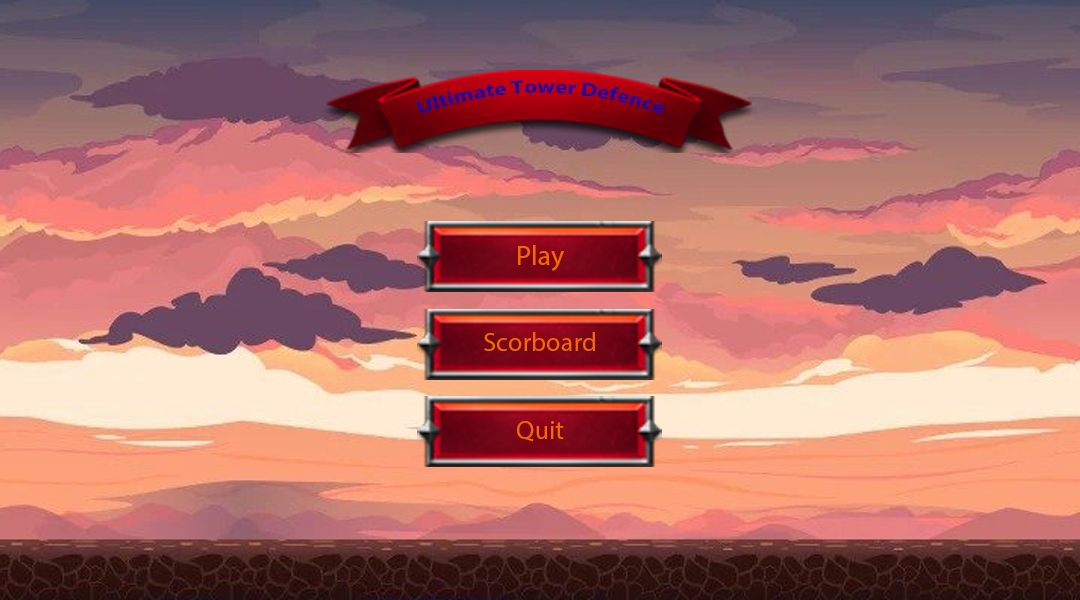
<style>
.page{position:relative;width:1080px;height:600px}
.page>*{position:absolute;margin:0}
.t1{font:19.1px "MyriadPro-Bold";color:#250294}
.t2{font:28.1px "MyriadPro-Regular";color:#f66901}
.t3{font:26.5px "MyriadPro-Regular";color:#f66901}
</style>
<div class="page">
<p class="t1" style="left:416px;top:80px;width:249px;height:35px;text-align:center">Ultimate Tower Defence</p>
<p class="t2" style="left:518px;top:245px;width:46px;height:26px">Play</p>
<p class="t3" style="left:484px;top:332px;width:111px;height:19px">Scorboard</p>
<p class="t3" style="left:517px;top:421px;width:47px;height:21px">Quit</p>
</div>
